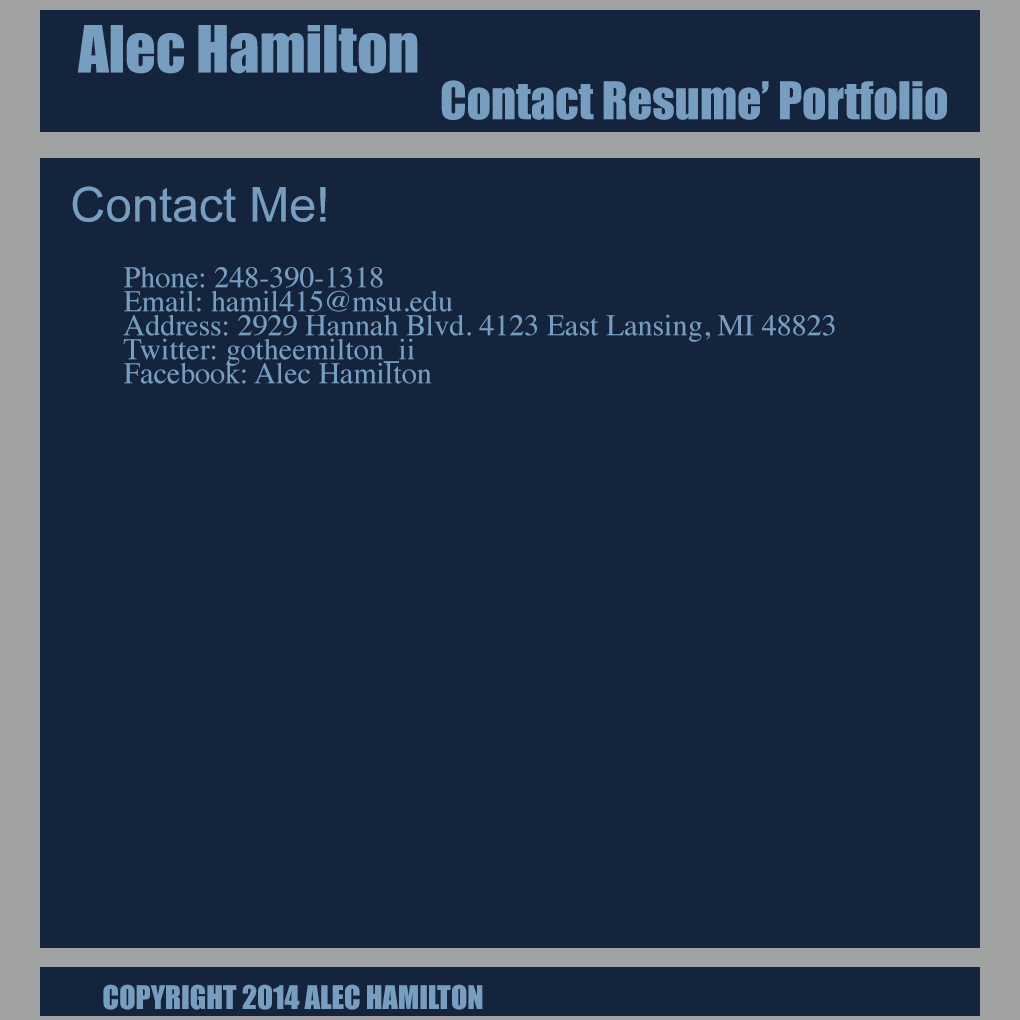
<style>
.page{position:relative;width:1020px;height:1020px;background:#14243d}
.page>*{position:absolute;margin:0}
.t1{font:60px "Impact";color:#779dc1}
.t2{font:48px "Impact";color:#779dc1}
.t3{font:48px "ArialMT";color:#779dc1}
.t4{font:30px/24px "Times-Roman";color:#779dc1}
.t5{font:30px "Impact";color:#779dc1}
</style>
<div class="page">
<p class="t1" style="left:78px;top:25px;width:340px;height:49px">Alec Hamilton</p>
<p class="t2" style="left:441px;top:80px;width:506px;height:40px">Contact Resume’ Portfolio</p>
<p class="t3" style="left:72px;top:186px;width:254px;height:36px">Contact Me!</p>
<p class="t4" style="left:123px;top:266px;width:712px;height:118px">Phone: 248-390-1318<br>Email: hamil415@msu.edu<br>Address: 2929 Hannah Blvd. 4123 East Lansing, MI 48823<br>Twitter: gotheemilton_ii<br>Facebook: Alec Hamilton</p>
<p class="t5" style="left:103px;top:984px;width:380px;height:26px">COPYRIGHT 2014 ALEC HAMILTON</p>
</div>
